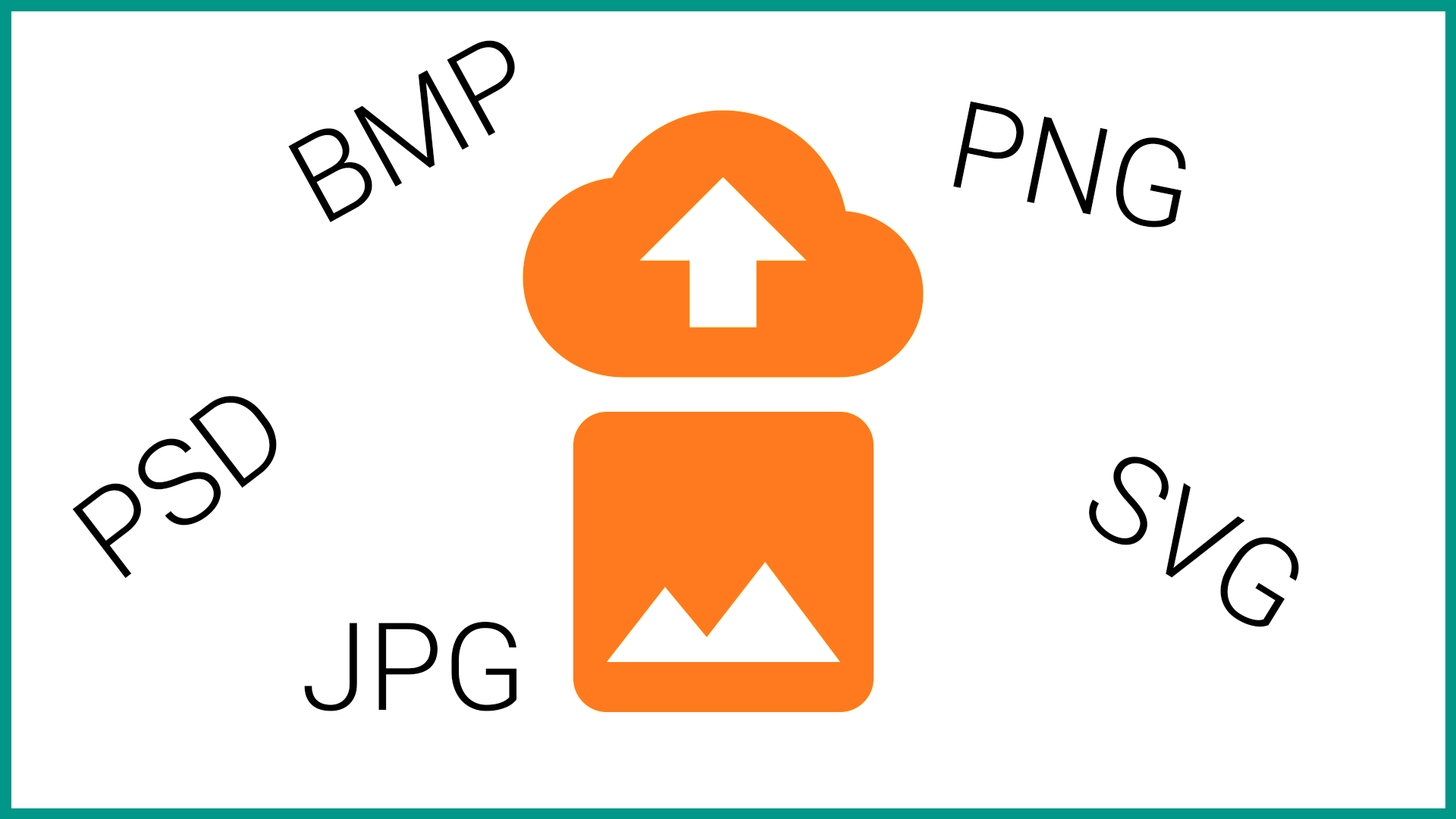
<style>
.page{position:relative;width:1456px;height:819px;background:#ffffff}
.page>*{position:absolute;margin:0}
.t1{font:122.1px "Roboto-Light";color:#000000}
</style>
<div class="page">
<p class="t1" style="left:288px;top:40px;width:227px;height:183px;rotate:-29deg">BMP</p>
<p class="t1" style="left:953px;top:101px;width:233px;height:126px;rotate:11deg">PNG</p>
<p class="t1" style="left:72px;top:396px;width:205px;height:183px;rotate:-37deg">PSD</p>
<p class="t1" style="left:1089px;top:457px;width:210px;height:170px;rotate:32deg">SVG</p>
<p class="t1" style="left:304px;top:621px;width:213px;height:90px">JPG</p>
</div>
